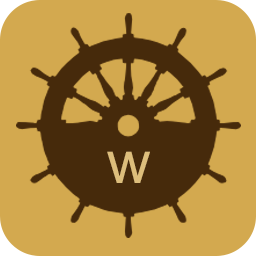
<style>
.page{position:relative;width:256px;height:256px;background:#d3a94f}
.page>*{position:absolute;margin:0}
.t1{font:60px "ArialMT";color:#ddbe7c}
</style>
<div class="page">
<p class="t1" style="left:107px;top:151px;width:43px;height:32px">w</p>
</div>
